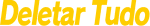
<style>
.page{position:relative;width:150px;height:26px;background:#ffffff}
.page>*{position:absolute;margin:0}
.t1{font:32px "RodinPro-EB";letter-spacing:-0.054em;color:#fecd00;font-style:italic;scale:0.76 1}
</style>
<div class="page">
<p class="t1" style="left:0px;top:0px;width:150px;height:26px">Deletar Tudo</p>
</div>
